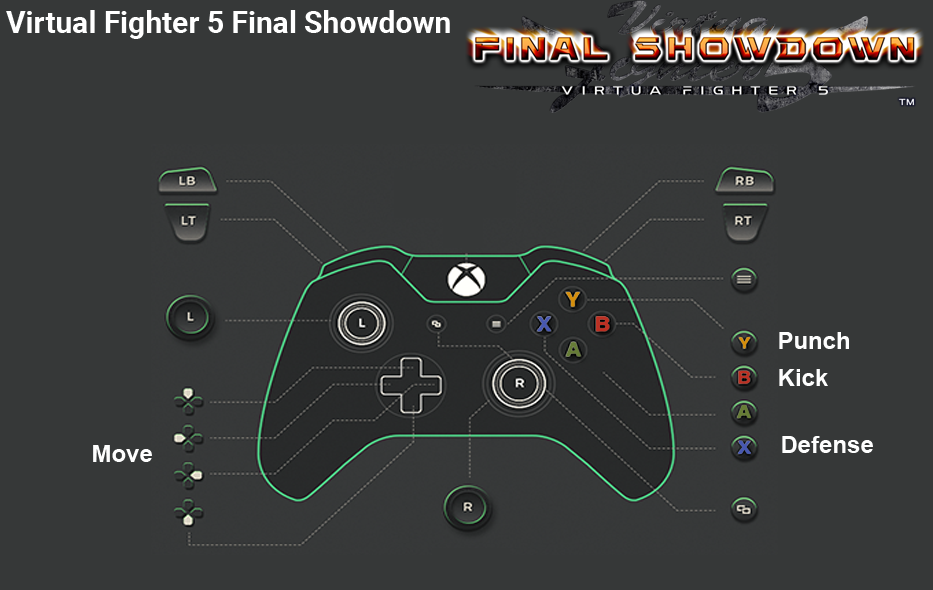
<style>
.page{position:relative;width:933px;height:590px;background:#363838}
.page>*{position:absolute;margin:0}
.t1{font:30px "Roboto-Bold";color:#ffffff}
.t2{font:24px "Arial-BoldMT";color:#fefefe}
</style>
<div class="page">
<p class="t1" style="left:6px;top:10px;width:444px;height:29px">Virtual Fighter 5 Final Showdown</p>
<p class="t2" style="left:779px;top:332px;width:70px;height:17px">Punch</p>
<p class="t2" style="left:779px;top:369px;width:49px;height:17px">Kick</p>
<p class="t2" style="left:782px;top:436px;width:91px;height:17px">Defense</p>
<p class="t2" style="left:93px;top:445px;width:59px;height:17px">Move</p>
</div>
